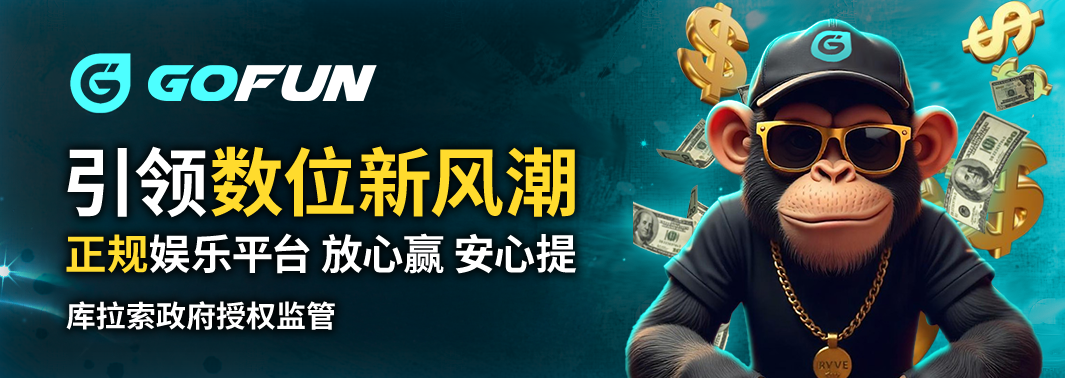
<style>
.page{position:relative;width:1065px;height:378px}
.page>*{position:absolute;margin:0}
.t1{font:74.9px "NotoSansCJKtc-Bold";letter-spacing:-0.01em;color:#ffdb2d}
.t2{font:74.9px "NotoSansCJKtc-Bold";letter-spacing:-0.01em;color:#ffffff}
.t3{font:41.8px "NotoSansCJKtc-Bold";letter-spacing:-0.01em;color:#ffffff}
.t4{font:41.8px "NotoSansCJKtc-Bold";letter-spacing:-0.01em;color:#ffdc30}
.t5{font:30px "NotoSansCJKtc-Bold";letter-spacing:-0.01em;color:#ffffff}
</style>
<div class="page">
<p class="t1" style="left:67px;top:146px;width:508px;height:72px"><span class="t2">引领</span>数位新风潮</p>
<p class="t3" style="left:66px;top:233px;width:511px;height:41px"><span class="t4">正规</span>娱乐平台 放心赢 安心提</p>
<p class="t5" style="left:66px;top:301px;width:269px;height:29px">库拉索政府授权监管</p>
</div>
